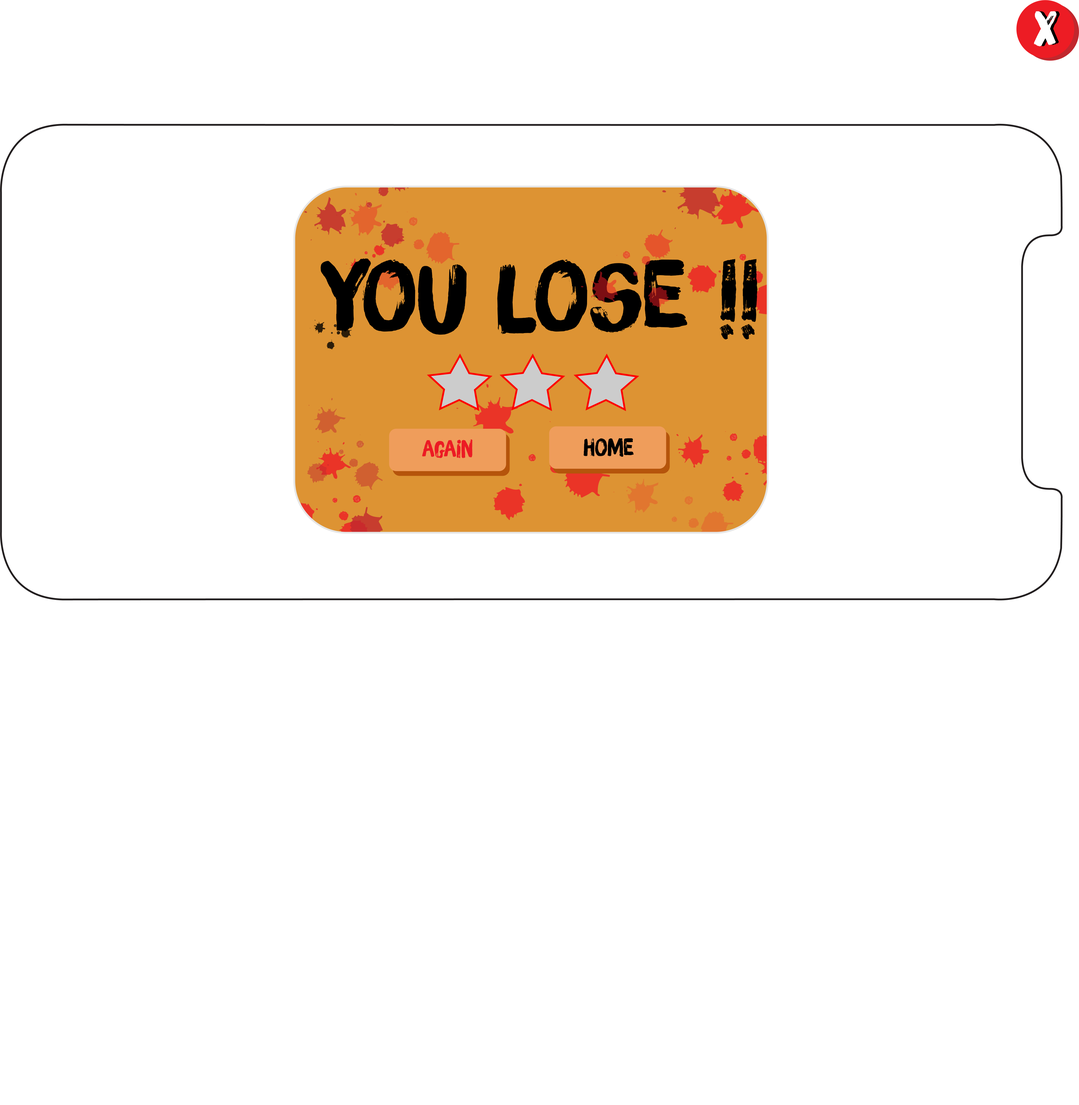
<style>
.page{position:relative;width:1079px;height:1105px;background:#ffffff}
.page>*{position:absolute;margin:0}
.t1{font:47.1px "iCielBrushUp";color:#ffffff}
.t2{font:47.1px "iCielBrushUp"}
.t3{font:94.3px "iCielBrushUp";color:#000000;scale:1.08 1}
.t4{font:23.5px "iCielBrushUp";color:#000000}
.t5{font:23.5px "iCielBrushUp";color:#ed1c24}
</style>
<div class="page">
<p class="t1" style="left:1034px;top:11px;width:23px;height:36px">x</p>
<p class="t2" style="left:1037px;top:11px;width:23px;height:36px">x</p>
<p class="t3" style="left:321px;top:258px;width:437px;height:82px">You lose !!</p>
<p class="t4" style="left:584px;top:438px;width:50px;height:19px">home</p>
<p class="t5" style="left:422px;top:439px;width:50px;height:19px">again</p>
</div>
